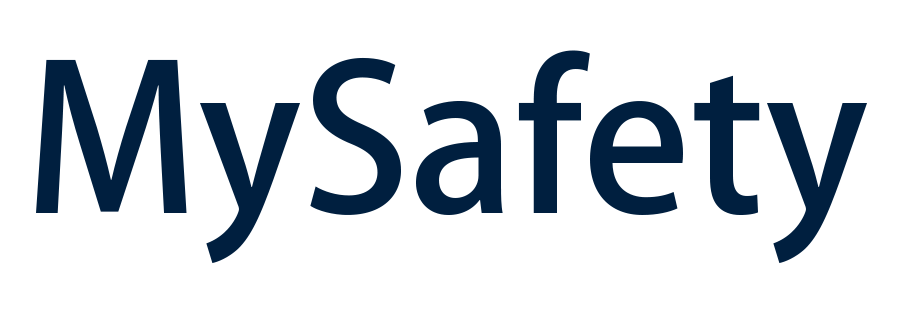
<style>
.page{position:relative;width:902px;height:314px;background:#ffffff}
.page>*{position:absolute;margin:0}
.t1{font:200px "AdobeHeitiStd-Regular";color:#001f3f}
</style>
<div class="page">
<p class="t1" style="left:36px;top:50px;width:831px;height:214px">MySafety</p>
</div>
